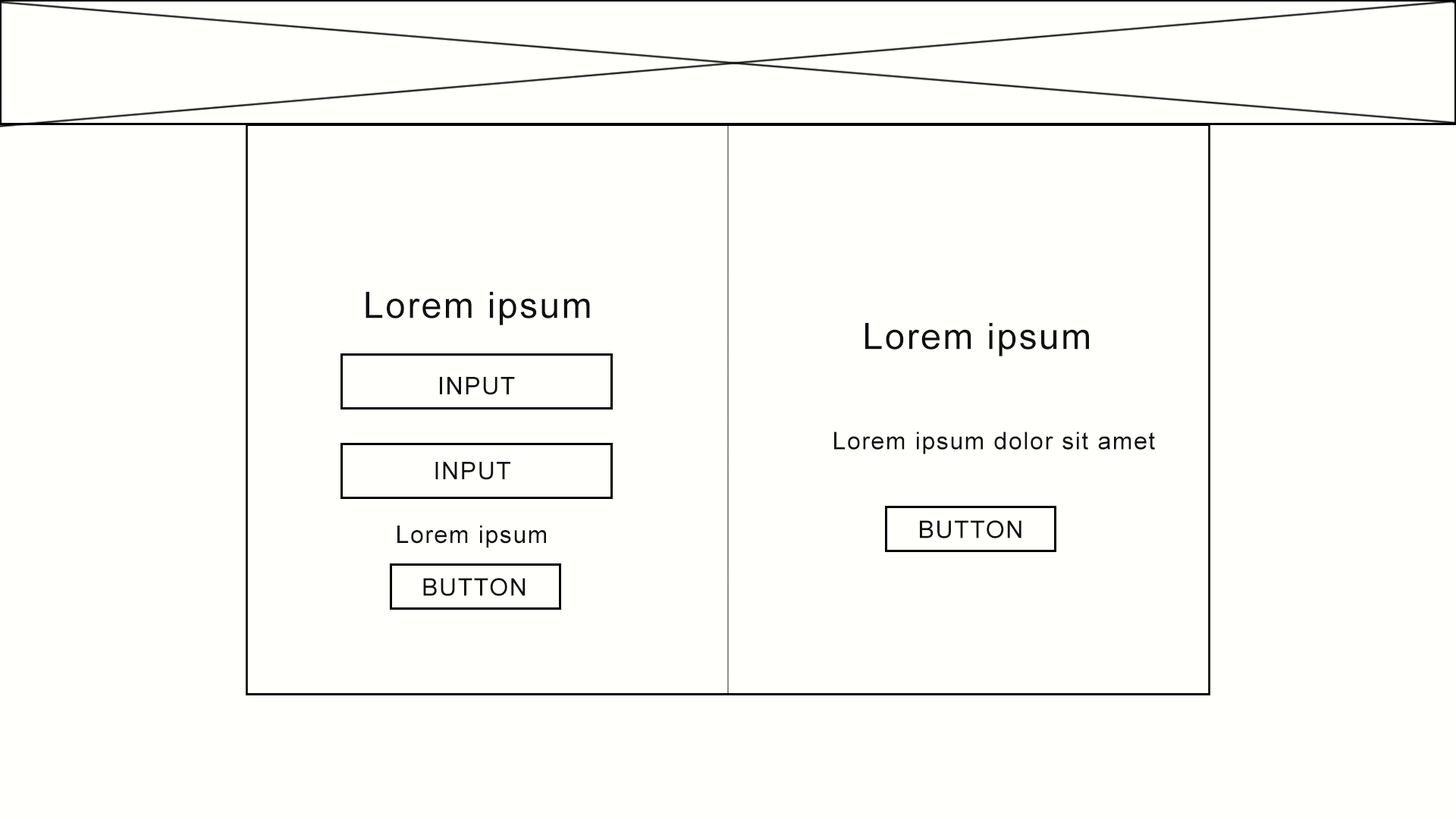
<style>
.page{position:relative;width:1456px;height:819px;background:#fffffc}
.page>*{position:absolute;margin:0}
.t1{font:36.4px "ArialMT";letter-spacing:0.05em;color:#101010}
.t2{font:24.3px "ArialMT";letter-spacing:0.05em;color:#101010}
</style>
<div class="page">
<p class="t1" style="left:366px;top:291px;width:224px;height:34px">Lorem ipsum</p>
<p class="t1" style="left:865px;top:322px;width:224px;height:34px">Lorem ipsum</p>
<p class="t2" style="left:440px;top:377px;width:75px;height:18px">INPUT</p>
<p class="t2" style="left:834px;top:431px;width:321px;height:23px">Lorem ipsum dolor sit amet</p>
<p class="t2" style="left:435px;top:462px;width:75px;height:18px">INPUT</p>
<p class="t2" style="left:920px;top:520px;width:101px;height:18px">BUTTON</p>
<p class="t2" style="left:397px;top:526px;width:149px;height:22px">Lorem ipsum</p>
<p class="t2" style="left:423px;top:578px;width:103px;height:18px">BUTTON</p>
</div>
